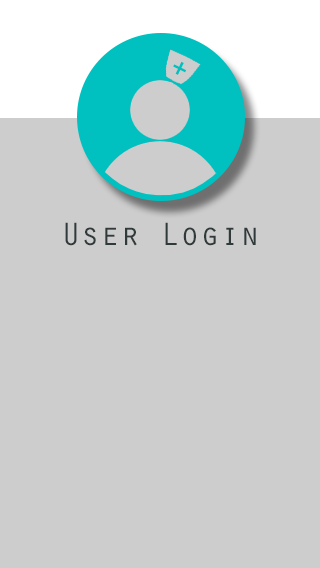
<style>
.page{position:relative;width:320px;height:568px;background:#cdcdcd}
.page>*{position:absolute;margin:0}
.t1{font:33.3px "OratorStd";color:#303a3a}
</style>
<div class="page">
<p class="t1" style="left:65px;top:222px;width:191px;height:24px">User Login</p>
</div>
